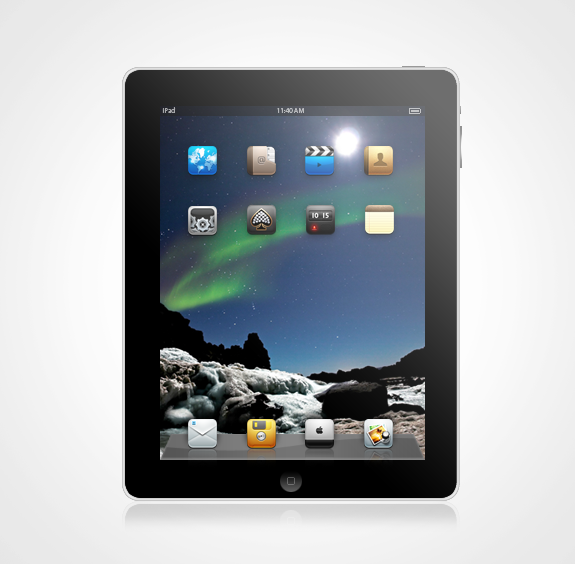
<style>
.page{position:relative;width:575px;height:564px}
.page>*{position:absolute;margin:0}
.t1{font:7.1px "MyriadPro-Regular";color:#a8a9ab}
.t2{font:7.1px "MyriadPro-Regular";color:#babcbf}
</style>
<div class="page">
<p class="t1" style="left:162px;top:107px;width:13px;height:6px">iPad</p>
<p class="t2" style="left:277px;top:108px;width:27px;height:6px">11:40 AM</p>
</div>
